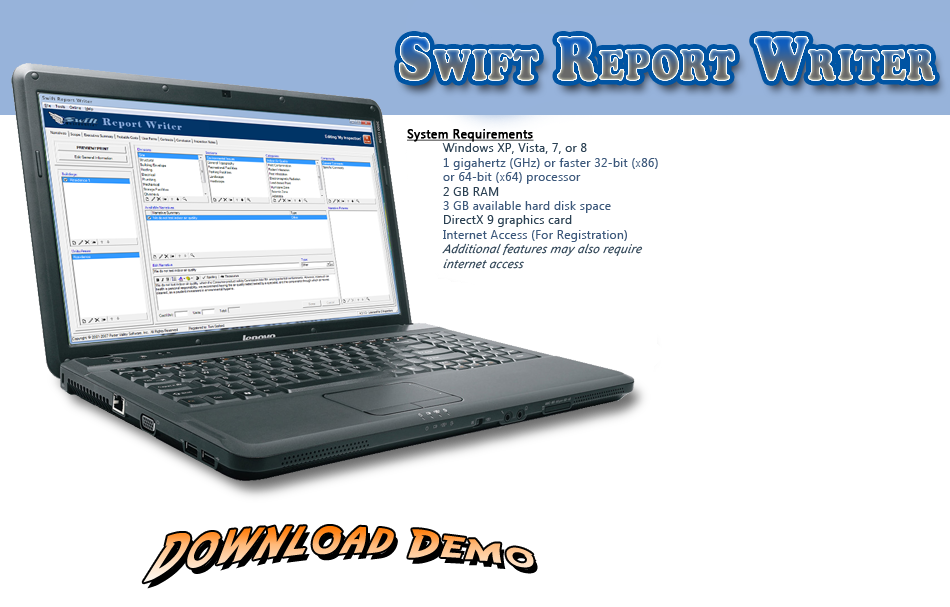
<style>
.page{position:relative;width:950px;height:607px;background:#ffffff}
.page>*{position:absolute;margin:0}
.t1{font:12px "SegoeUI";letter-spacing:0.025em;color:#3c587b}
.t2{font:12px "SegoeUI";letter-spacing:0.025em;color:#000000;font-weight:bold;text-decoration:underline}
.t3{font:12px "SegoeUI";letter-spacing:0.025em;color:#2a4052}
.t4{font:12px "SegoeUI-Italic";letter-spacing:0.025em;color:#2a4052;font-style:italic}
</style>
<div class="page">
<p class="t1" style="left:407px;top:129px;width:251px;height:140px"><span class="t2">System Requirements<br> </span><span class="t3">Windows XP, Vista, 7, or 8<br> </span>1 gigahertz (GHz) or faster 32-bit (x86) <br> or 64-bit (x64) processor <br> <span class="t3">2 GB RAM<br> </span>3 GB available hard disk space<br> <span class="t3">DirectX 9 graphics card<br> </span>Internet Access (For Registration)<br> <span class="t4">Additional features may also require <br> internet access</span></p>
</div>
